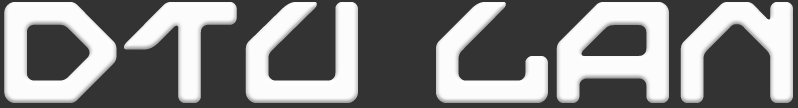
<style>
.page{position:relative;width:798px;height:108px;background:#333333}
.page>*{position:absolute;margin:0}
.t1{font:150px "NextGames";letter-spacing:-0.025em;color:#fcfcfc}
</style>
<div class="page">
<p class="t1" style="left:4px;top:2px;width:789px;height:101px">DTU LAN</p>
</div>
